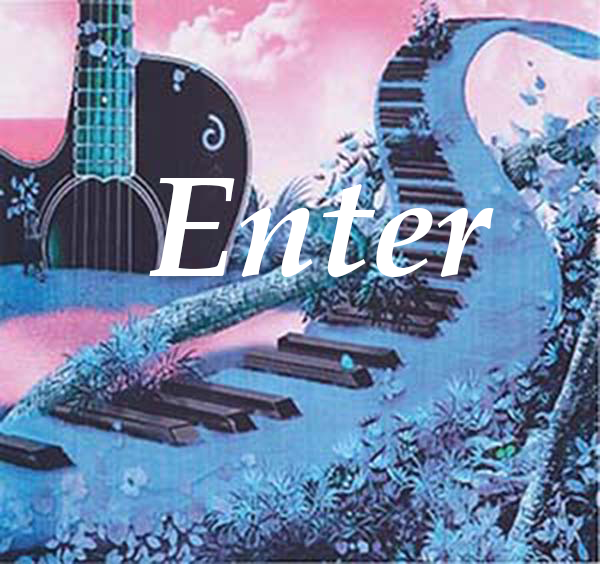
<style>
.page{position:relative;width:600px;height:564px}
.page>*{position:absolute;margin:0}
.t1{font:141.7px "BookAntiqua-BoldItalic";color:#ffffff}
</style>
<div class="page">
<p class="t1" style="left:149px;top:178px;width:345px;height:99px">Enter</p>
</div>
